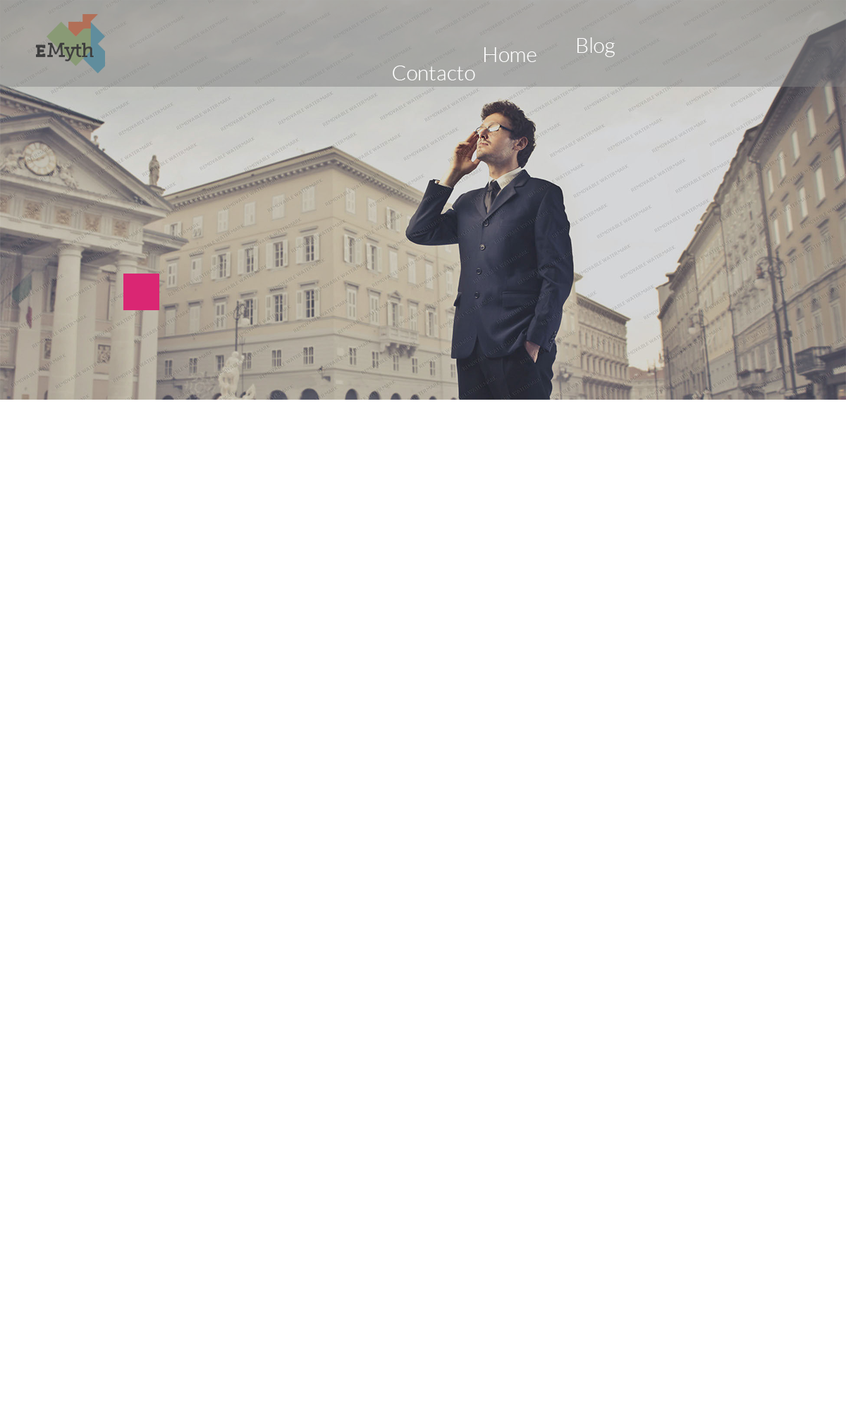
<style>
.page{position:relative;width:846px;height:1410px;background:#ffffff}
.page>*{position:absolute;margin:0}
.t1{font:21.1px "Lato-Light";letter-spacing:-0.005em;color:#ffffff}
</style>
<div class="page">
<p class="t1" style="left:577px;top:37px;width:38px;height:20px">Blog</p>
<p class="t1" style="left:484px;top:47px;width:52px;height:15px">Home</p>
<p class="t1" style="left:393px;top:66px;width:82px;height:14px">Contacto</p>
</div>
